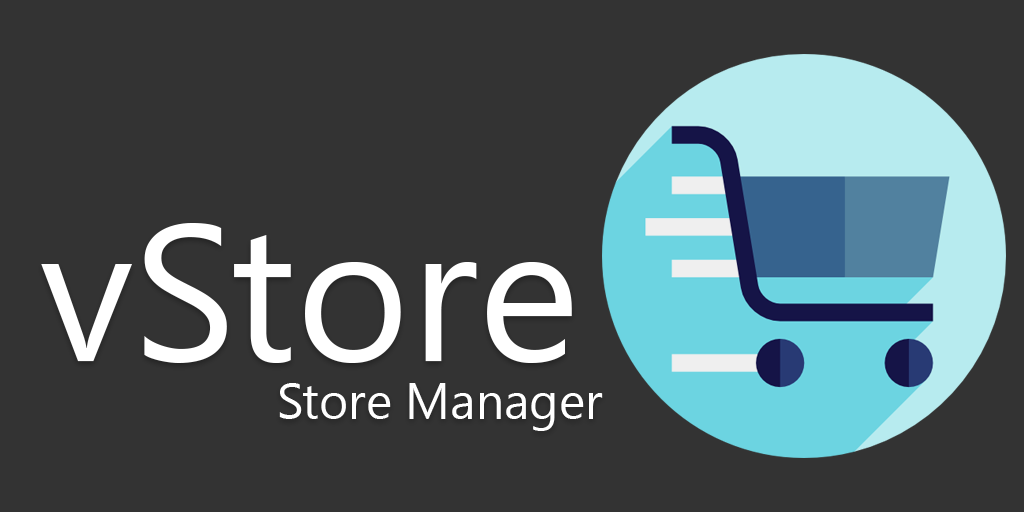
<style>
.page{position:relative;width:1024px;height:512px;background:#333333}
.page>*{position:absolute;margin:0}
.t1{font:194.4px "SegoeUI";color:#ffffff}
.t2{font:50px "SegoeUI";color:#ffffff}
</style>
<div class="page">
<p class="t1" style="left:41px;top:223px;width:531px;height:140px">vStore</p>
<p class="t2" style="left:279px;top:383px;width:324px;height:48px">Store Manager</p>
</div>
